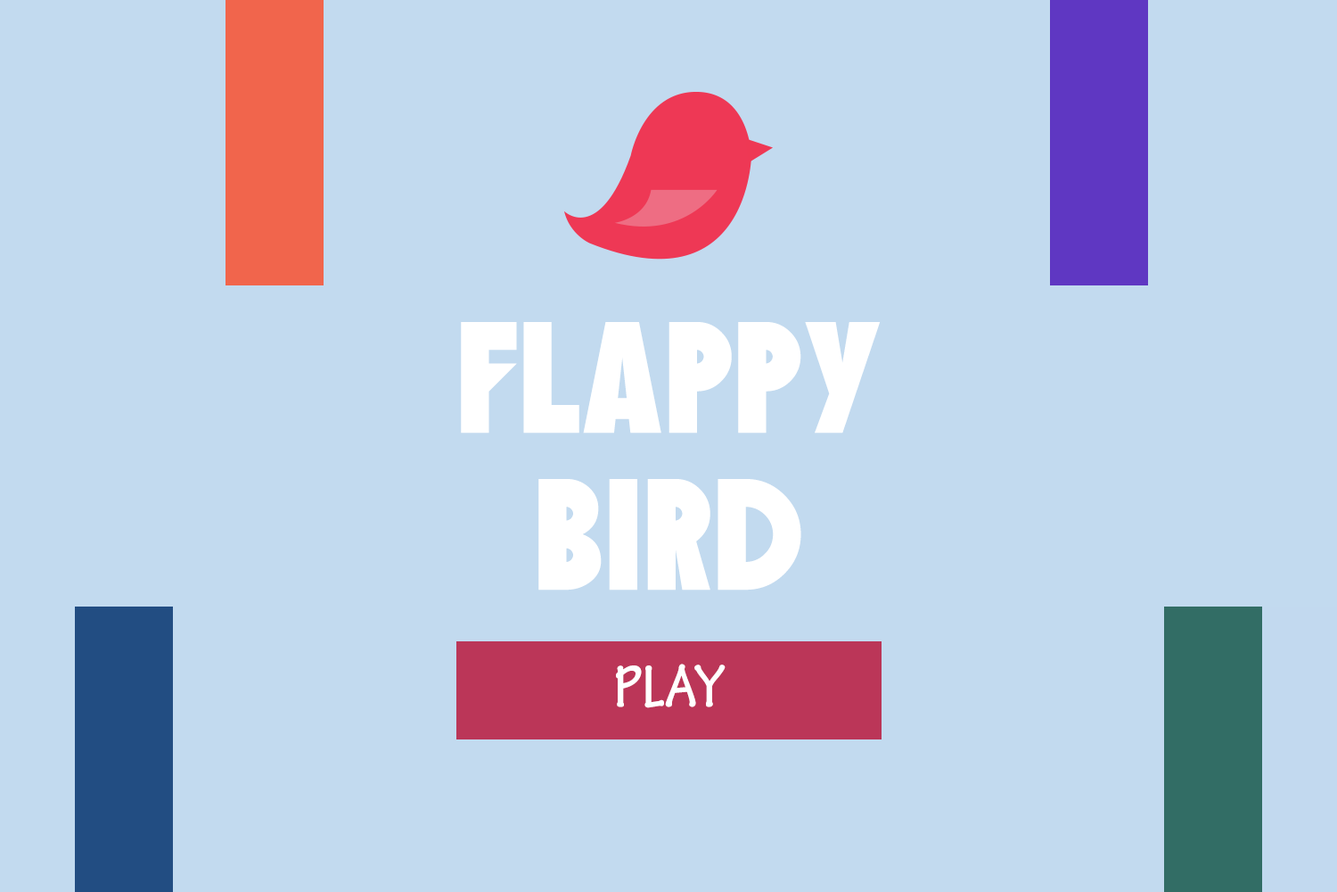
<style>
.page{position:relative;width:1337px;height:892px;background:#c2daef}
.page>*{position:absolute;margin:0}
.t1{font:165.8px "SFSpeakeasy";color:#ffffff}
.t2{font:64.2px "TektonPro-BoldCond";color:#ffffff}
</style>
<div class="page">
<p class="t1" style="left:461px;top:322px;width:420px;height:268px">Flappy Bird</p>
<p class="t2" style="left:616px;top:663px;width:110px;height:45px">PLAY</p>
</div>
